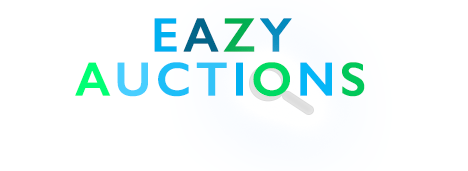
<style>
.page{position:relative;width:468px;height:171px;background:#ffffff}
.page>*{position:absolute;margin:0}
.t1{font:48px "GillSans-SemiBold";letter-spacing:0.075em;color:#00b0f0;font-weight:bold}
.t2{font:48px "GillSans-SemiBold";letter-spacing:0.075em;color:#026589;font-weight:bold}
.t3{font:48px "GillSans-SemiBold";letter-spacing:0.075em;color:#00b050;font-weight:bold}
.t4{font:48px "GillSans-SemiBold";letter-spacing:0.075em;color:#018bbd;font-weight:bold}
.t5{font:48px "GillSans-SemiBold";letter-spacing:0.075em;color:#00ff74;font-weight:bold}
.t6{font:48px "GillSans-SemiBold";letter-spacing:0.075em;color:#49ceff;font-weight:bold}
.t7{font:48px "GillSans-SemiBold";letter-spacing:0.075em;color:#1dbef8;font-weight:bold}
.t8{font:48px "GillSans-SemiBold";letter-spacing:0.075em;color:#32c3f8;font-weight:bold}
.t9{font:48px "GillSans-SemiBold";letter-spacing:0.075em;color:#00da63;font-weight:bold}
.t10{font:48px "GillSans-SemiBold";letter-spacing:0.075em;color:#04b6f7;font-weight:bold}
.t11{font:48px "GillSans-SemiBold";letter-spacing:0.075em;color:#00c75a;font-weight:bold}
</style>
<div class="page">
<p class="t1" style="left:154px;top:18px;width:138px;height:34px">E<span class="t2">A</span><span class="t3">Z</span><span class="t4">Y</span></p>
<p class="t5" style="left:75px;top:62px;width:290px;height:35px">A<span class="t6">U</span><span class="t7">C</span><span class="t8">T</span><span class="t1">I</span><span class="t9">O</span><span class="t10">N</span><span class="t11">S</span></p>
</div>
